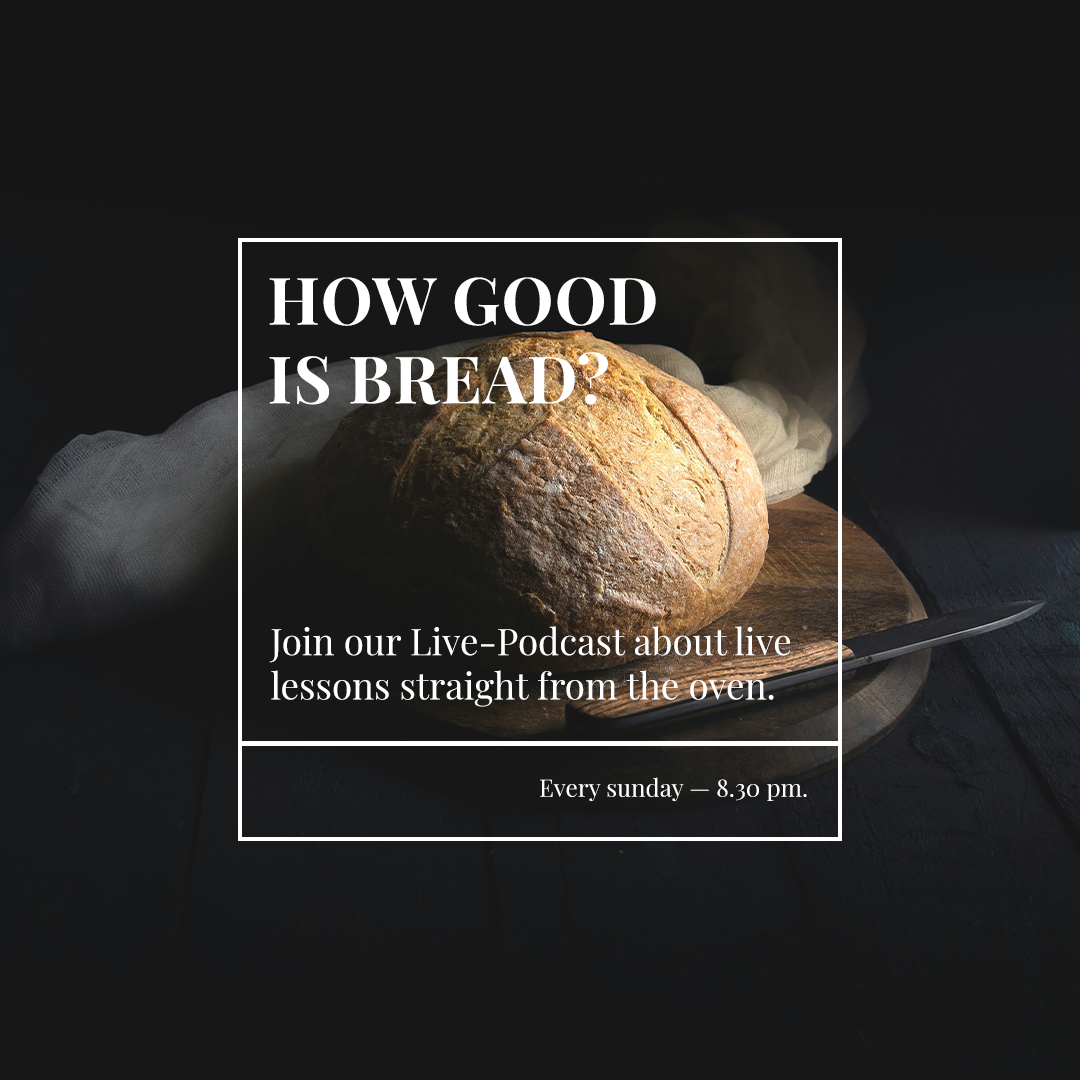
<style>
.page{position:relative;width:1080px;height:1080px;background:#161616}
.page>*{position:absolute;margin:0}
.t1{font:65.6px "PlayfairDisplay-Bold";color:#ffffff;text-transform:uppercase}
.t2{font:36.7px "PlayfairDisplay-Regular";color:#ffffff}
.t3{font:24.2px "PlayfairDisplay-Regular";color:#ffffff}
</style>
<div class="page">
<p class="t1" style="left:269px;top:277px;width:387px;height:128px">How good <br>is Bread?</p>
<p class="t2" style="left:269px;top:626px;width:522px;height:81px">Join our Live-Podcast about live <br>lessons straight from the oven.</p>
<p class="t3" style="left:540px;top:777px;width:267px;height:25px">Every sunday — 8.30 pm.</p>
</div>
